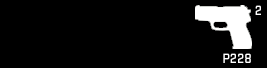
<style>
.page{position:relative;width:267px;height:68px;background:#000000}
.page>*{position:absolute;margin:0}
.t1{font:14px "StratumNo2-Medium";color:#ffffff}
</style>
<div class="page">
<p class="t1" style="left:255px;top:5px;width:6px;height:10px">2</p>
<p class="t1" style="left:223px;top:53px;width:28px;height:10px">P228</p>
</div>
